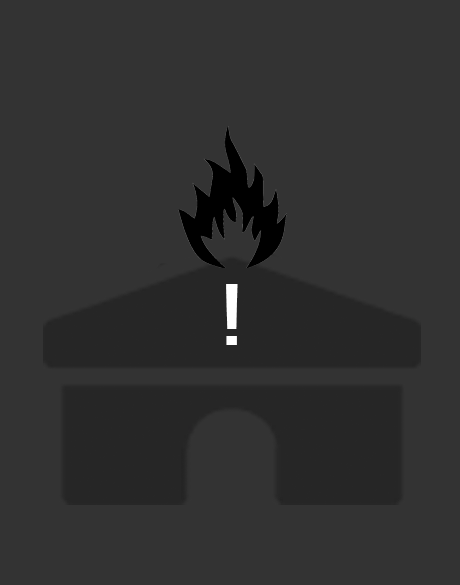
<style>
.page{position:relative;width:460px;height:585px;background:#333333}
.page>*{position:absolute;margin:0}
.t1{font:81.6px "Tahoma";letter-spacing:-0.01em;color:#ffffff;font-weight:bold}
</style>
<div class="page">
<p class="t1" style="left:226px;top:284px;width:12px;height:61px">!</p>
</div>
